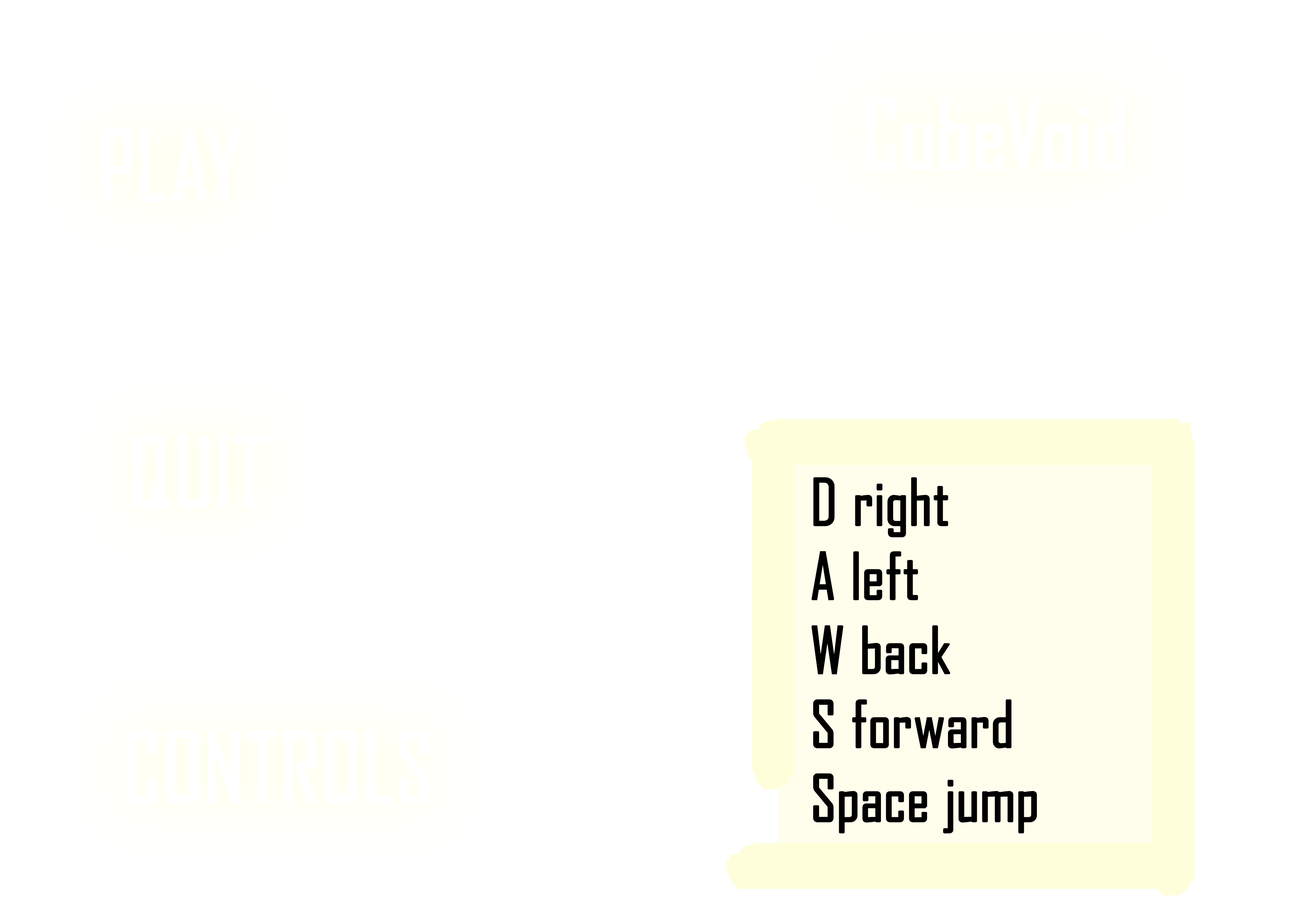
<style>
.page{position:relative;width:1299px;height:918px;background:#ffffff}
.page>*{position:absolute;margin:0}
.t1{font:92.6px "AgencyFB-Reg";color:#ffffff;font-weight:bold}
.t2{font:61.7px "AgencyFB-Reg";color:#000000;font-weight:bold}
</style>
<div class="page">
<p class="t1" style="left:865px;top:97px;width:259px;height:74px">CubeVoid</p>
<p class="t1" style="left:102px;top:128px;width:139px;height:74px">PLAY</p>
<p class="t1" style="left:133px;top:435px;width:133px;height:74px">QUIT</p>
<p class="t2" style="left:811px;top:477px;width:226px;height:357px">D right<br>A left<br>W back<br>S forward<br>Space jump</p>
<p class="t1" style="left:126px;top:730px;width:303px;height:74px">CONTROLS</p>
</div>
